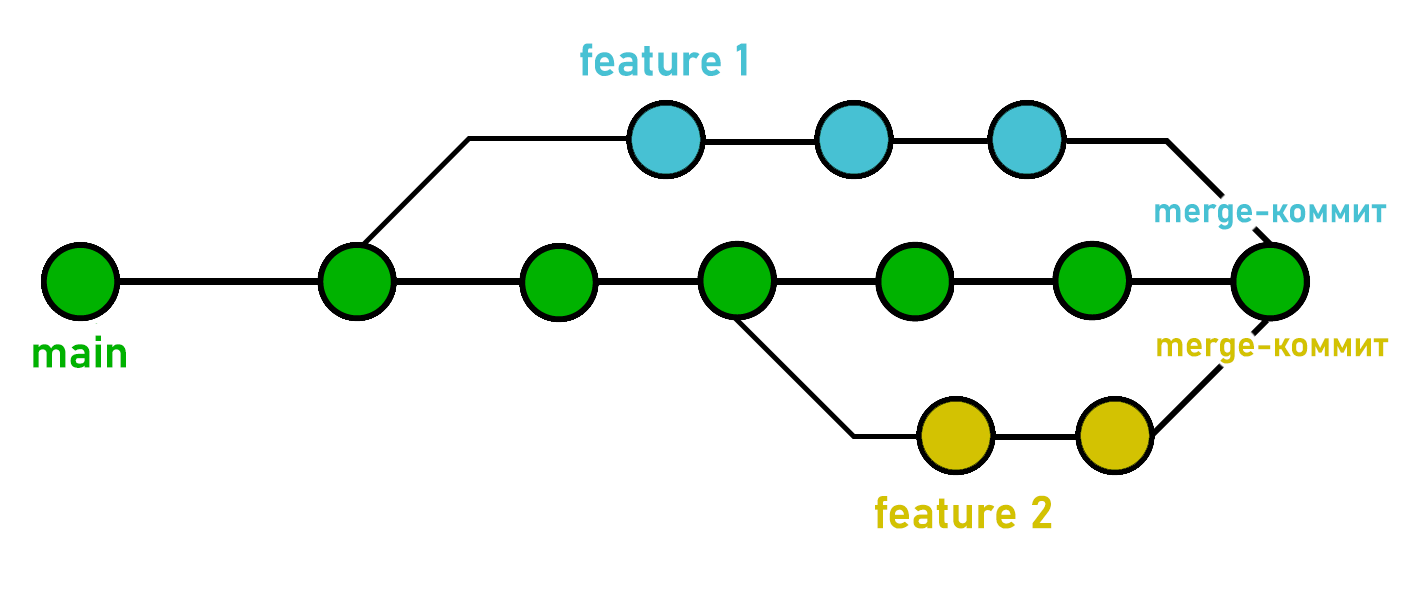
<style>
.page{position:relative;width:1420px;height:611px;background:#ffffff}
.page>*{position:absolute;margin:0}
.t1{font:45px "Bahnschrift-SemiBold";color:#47c1d3}
.t2{font:35px "Bahnschrift-SemiBold";color:#47c1d3}
.t3{font:45px "Bahnschrift-SemiBold";color:#00b200}
.t4{font:35px "Bahnschrift-SemiBold";color:#d3c202}
.t5{font:45px "Bahnschrift-SemiBold";color:#d3c202}
</style>
<div class="page">
<p class="t1" style="left:580px;top:43px;width:167px;height:33px">feature 1</p>
<p class="t2" style="left:1155px;top:204px;width:232px;height:26px">merge-коммит</p>
<p class="t3" style="left:33px;top:335px;width:93px;height:33px">main</p>
<p class="t4" style="left:1157px;top:338px;width:232px;height:26px">merge-коммит</p>
<p class="t5" style="left:875px;top:495px;width:177px;height:34px">feature 2</p>
</div>
